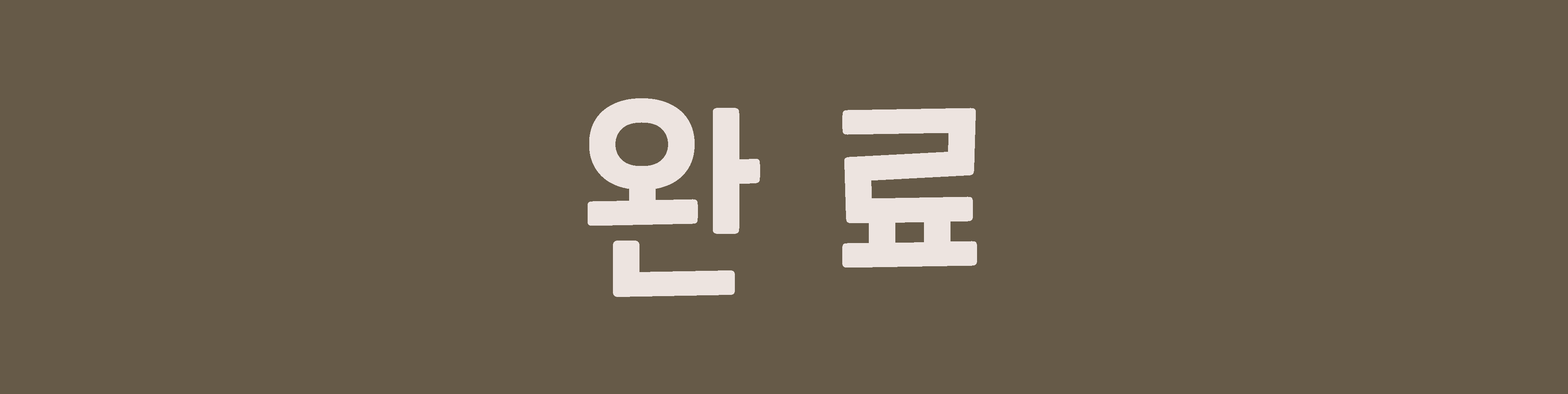
<style>
.page{position:relative;width:1568px;height:394px;background:#665a48}
.page>*{position:absolute;margin:0}
.t1{font:207.4px "CookieRun-Regular";color:#ede4e0}
</style>
<div class="page">
<p class="t1" style="left:588px;top:98px;width:389px;height:199px">완 료</p>
</div>
